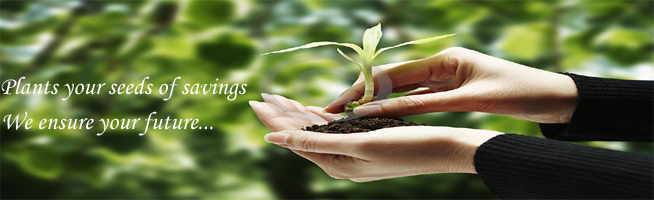
<style>
.page{position:relative;width:654px;height:200px}
.page>*{position:absolute;margin:0}
.t1{font:25px "MonotypeCorsiva";color:#fdfcfc}
</style>
<div class="page">
<p class="t1" style="left:1px;top:76px;width:246px;height:25px">Plants your seeds of savings</p>
<p class="t1" style="left:3px;top:111px;width:210px;height:25px">We ensure your future...</p>
</div>
